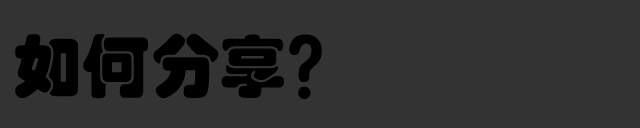
<style>
.page{position:relative;width:640px;height:128px;background:#333333}
.page>*{position:absolute;margin:0}
.t1{font:68.1px "STHupo";color:#000000}
</style>
<div class="page">
<p class="t1" style="left:15px;top:33px;width:307px;height:66px">如何分享？</p>
</div>
